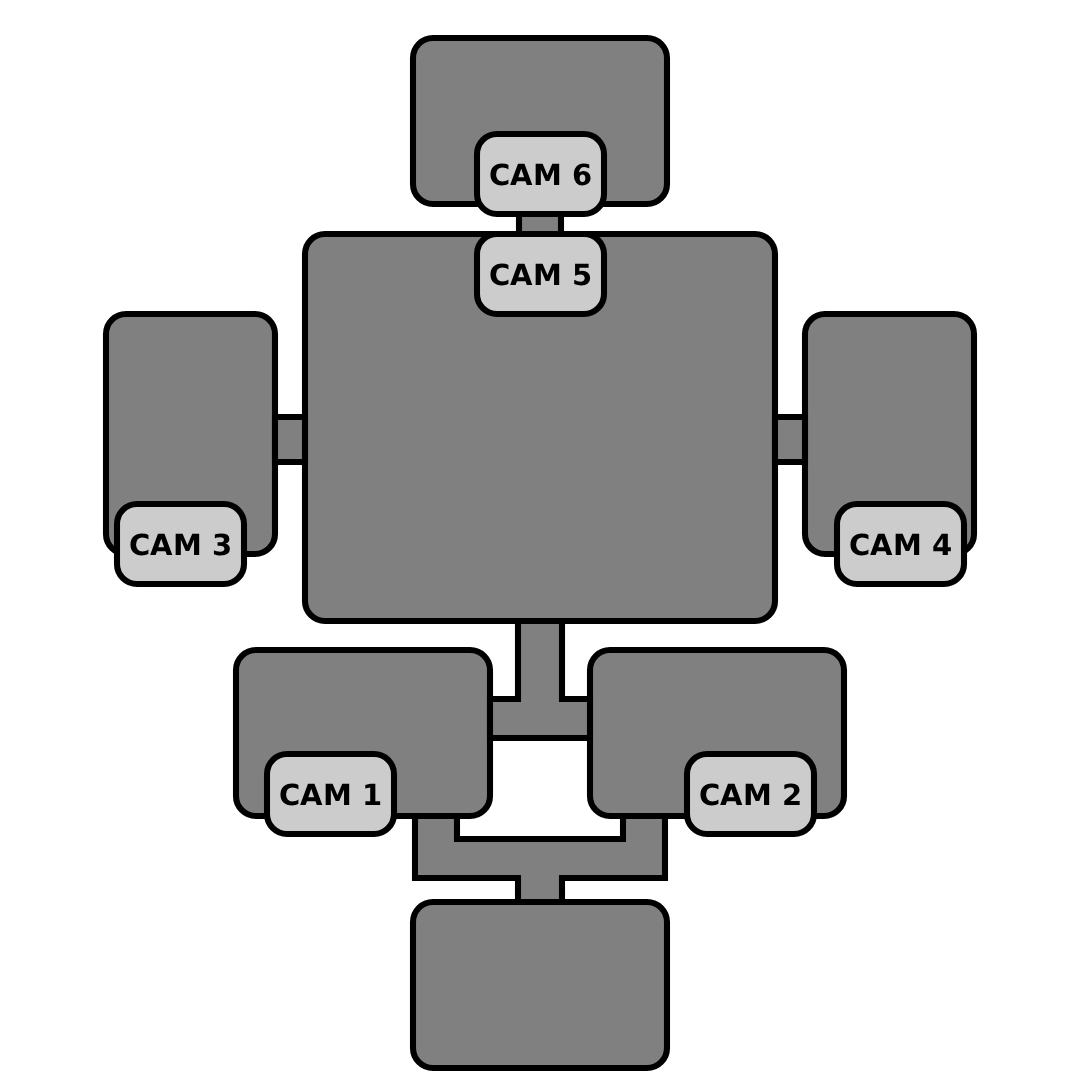
<style>
.page{position:relative;width:1080px;height:1080px;background:#ffffff}
.page>*{position:absolute;margin:0}
.t1{font:29px "BitstreamVeraSans-Bold";color:#000000}
</style>
<div class="page">
<p class="t1" style="left:490px;top:163px;width:101px;height:23px">CAM 6</p>
<p class="t1" style="left:490px;top:263px;width:101px;height:23px">CAM 5</p>
<p class="t1" style="left:130px;top:533px;width:100px;height:23px">CAM 3</p>
<p class="t1" style="left:850px;top:533px;width:101px;height:23px">CAM 4</p>
<p class="t1" style="left:280px;top:783px;width:101px;height:23px">CAM 1</p>
<p class="t1" style="left:700px;top:783px;width:100px;height:23px">CAM 2</p>
</div>
